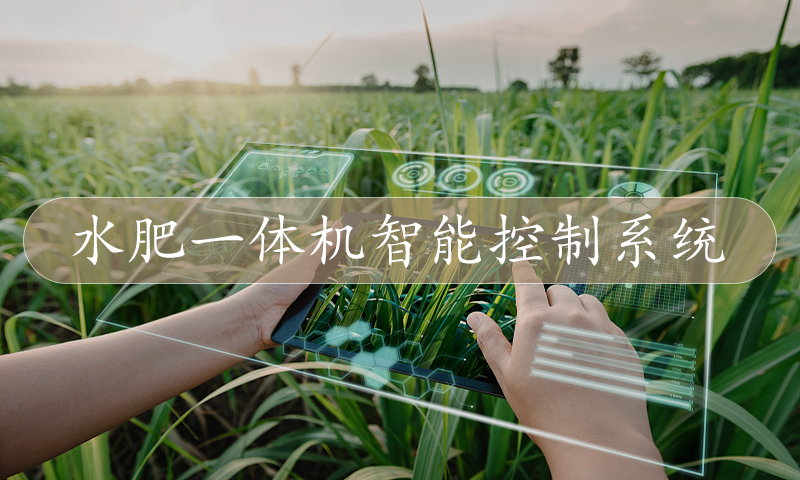
<style>
.page{position:relative;width:800px;height:480px}
.page>*{position:absolute;margin:0}
.t1{font:60px "KaiTi";color:#ffffff}
</style>
<div class="page">
<p class="t1" style="left:72px;top:213px;width:653px;height:55px">水肥一体机智能控制系统</p>
</div>
